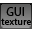
<style>
.page{position:relative;width:32px;height:32px}
.page>*{position:absolute;margin:0}
.t1{font:12px "MyriadPro-Regular";color:#000000}
.t2{font:10px "MyriadPro-Regular";color:#000000}
</style>
<div class="page">
<p class="t1" style="left:6px;top:7px;width:18px;height:9px">GUI</p>
<p class="t2" style="left:1px;top:18px;width:30px;height:7px">texture</p>
</div>
